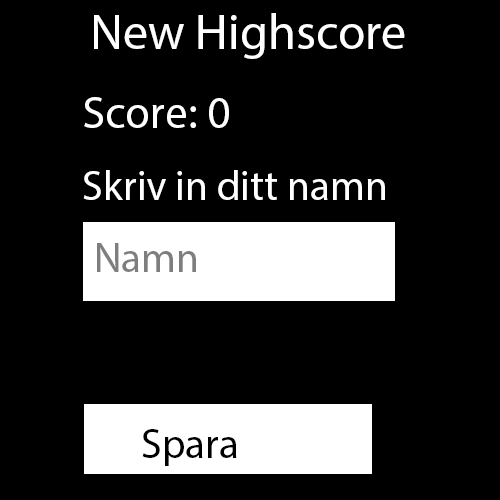
<style>
.page{position:relative;width:500px;height:500px;background:#000000}
.page>*{position:absolute;margin:0}
.t1{font:12px "MyriadPro-Regular";color:#ffffff}
.t2{font:45.8px "MyriadPro-Regular";color:#ffffff}
.t3{font:41.7px "MyriadPro-Regular";color:#ffffff}
.t4{font:41.7px "MyriadPro-Regular";color:#7e7e7e}
.t5{font:41.7px "MyriadPro-Regular";color:#000000}
</style>
<div class="page">
<p class="t1" style="left:94px;top:13px;width:311px;height:46px">New Highscore</p>
<p class="t2" style="left:84px;top:97px;width:145px;height:31px">Score: 0</p>
<p class="t3" style="left:83px;top:170px;width:302px;height:30px">Skriv in ditt namn</p>
<p class="t4" style="left:97px;top:243px;width:99px;height:29px">Namn</p>
<p class="t5" style="left:142px;top:429px;width:95px;height:37px">Spara</p>
</div>
